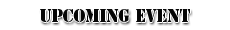
<style>
.page{position:relative;width:230px;height:30px;background:#ffffff}
.page>*{position:absolute;margin:0}
.t1{font:17.2px "StencilStd";color:#000000;text-transform:uppercase;scale:0.94 1}
</style>
<div class="page">
<p class="t1" style="left:40px;top:9px;width:150px;height:13px">Upcoming Event</p>
</div>
